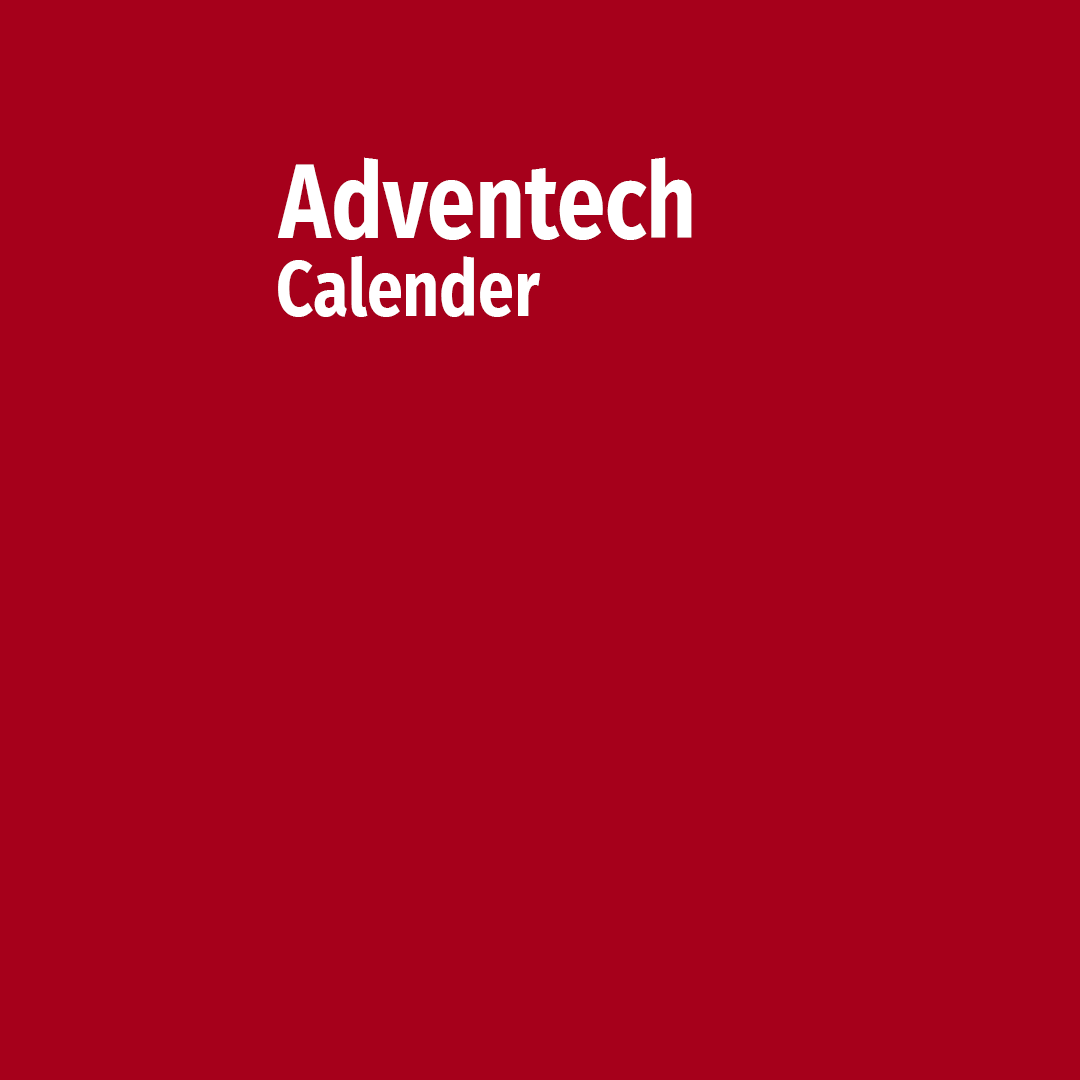
<style>
.page{position:relative;width:1080px;height:1080px;background:#a6001b}
.page>*{position:absolute;margin:0}
.t1{font:105px "FiraSans-Bold";color:#ffffff;scale:0.83 1}
.t2{font:78px "FiraSans-Bold";color:#ffffff;scale:0.83 1}
</style>
<div class="page">
<p class="t1" style="left:278px;top:157px;width:414px;height:83px">Adventech</p>
<p class="t2" style="left:278px;top:256px;width:263px;height:61px">Calender</p>
</div>
